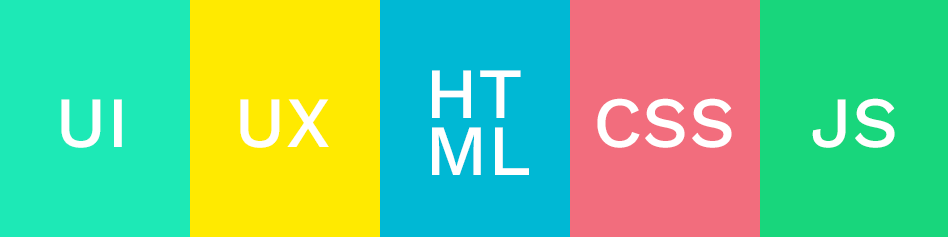
<style>
.page{position:relative;width:948px;height:237px}
.page>*{position:absolute;margin:0}
.t1{font:72px "WorkSans-Medium";color:#ffffff}
</style>
<div class="page">
<p class="t1" style="left:432px;top:70px;width:89px;height:48px">HT</p>
<p class="t1" style="left:61px;top:99px;width:61px;height:49px">UI</p>
<p class="t1" style="left:240px;top:99px;width:89px;height:49px">UX</p>
<p class="t1" style="left:597px;top:98px;width:135px;height:50px">CSS</p>
<p class="t1" style="left:812px;top:98px;width:83px;height:50px">JS</p>
<p class="t1" style="left:432px;top:127px;width:97px;height:48px">ML</p>
</div>
